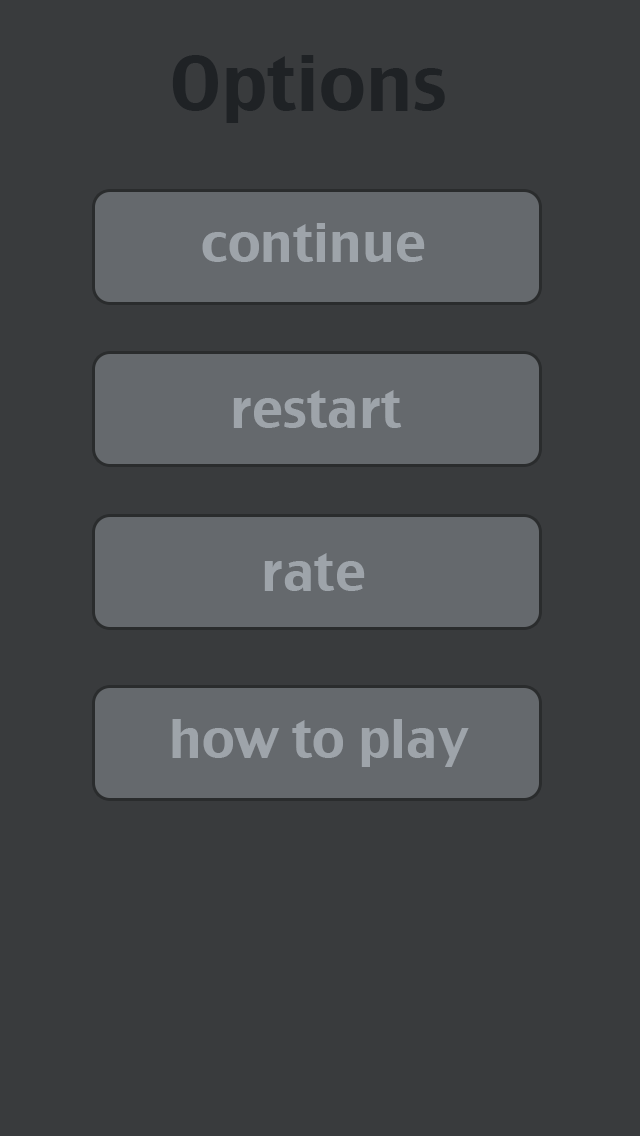
<style>
.page{position:relative;width:640px;height:1136px;background:#393b3d}
.page>*{position:absolute;margin:0}
.t1{font:73.3px "CharcoalCY";color:#1f2225}
.t2{font:51.3px "CharcoalCY";color:#9ea4aa}
</style>
<div class="page">
<p class="t1" style="left:172px;top:55px;width:273px;height:68px">Options</p>
<p class="t2" style="left:202px;top:223px;width:223px;height:39px">continue</p>
<p class="t2" style="left:233px;top:390px;width:169px;height:38px">restart</p>
<p class="t2" style="left:264px;top:553px;width:101px;height:38px">rate</p>
<p class="t2" style="left:172px;top:719px;width:297px;height:48px">how to play</p>
</div>
